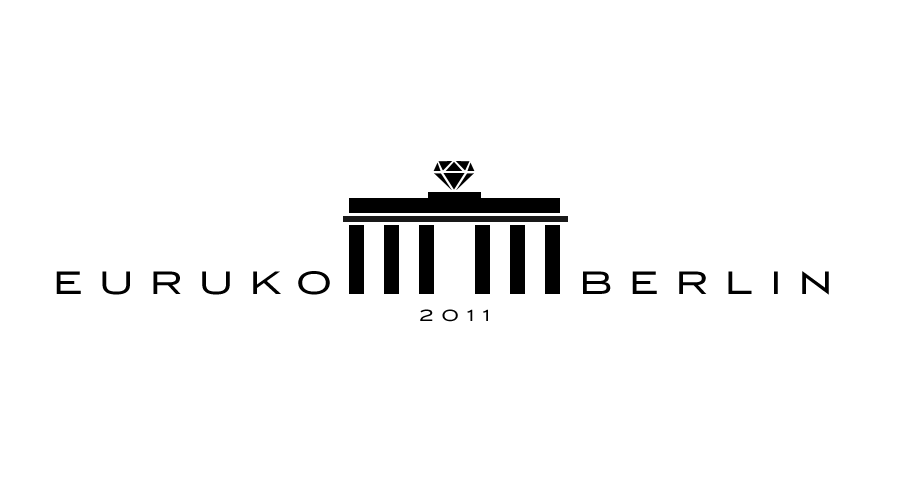
<style>
.page{position:relative;width:900px;height:500px;background:#ffffff}
.page>*{position:absolute;margin:0}
.t1{font:36px "Luxury-Gold";letter-spacing:0.5em;color:#000000}
.t2{font:18px "Luxury-Gold";letter-spacing:0.5em;color:#000000}
</style>
<div class="page">
<p class="t1" style="left:56px;top:271px;width:274px;height:24px">EURUKO</p>
<p class="t1" style="left:583px;top:271px;width:246px;height:24px">BERLIN</p>
<p class="t2" style="left:420px;top:309px;width:68px;height:13px">2011</p>
</div>
